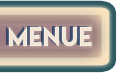
<style>
.page{position:relative;width:117px;height:73px}
.page>*{position:absolute;margin:0}
.t1{font:23.6px "LemonMilk";letter-spacing:0.05em;color:#f3e8d9}
</style>
<div class="page">
<p class="t1" style="left:9px;top:26px;width:83px;height:21px">Menue</p>
<p class="t1" style="left:9px;top:26px;width:83px;height:21px">Menue</p>
</div>
